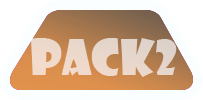
<style>
.page{position:relative;width:203px;height:100px;background:#fbfeff}
.page>*{position:absolute;margin:0}
.t1{font:48px "ShowcardGothic-Reg";color:#ead8cb}
</style>
<div class="page">
<p class="t1" style="left:31px;top:38px;width:146px;height:39px">pack2</p>
</div>
